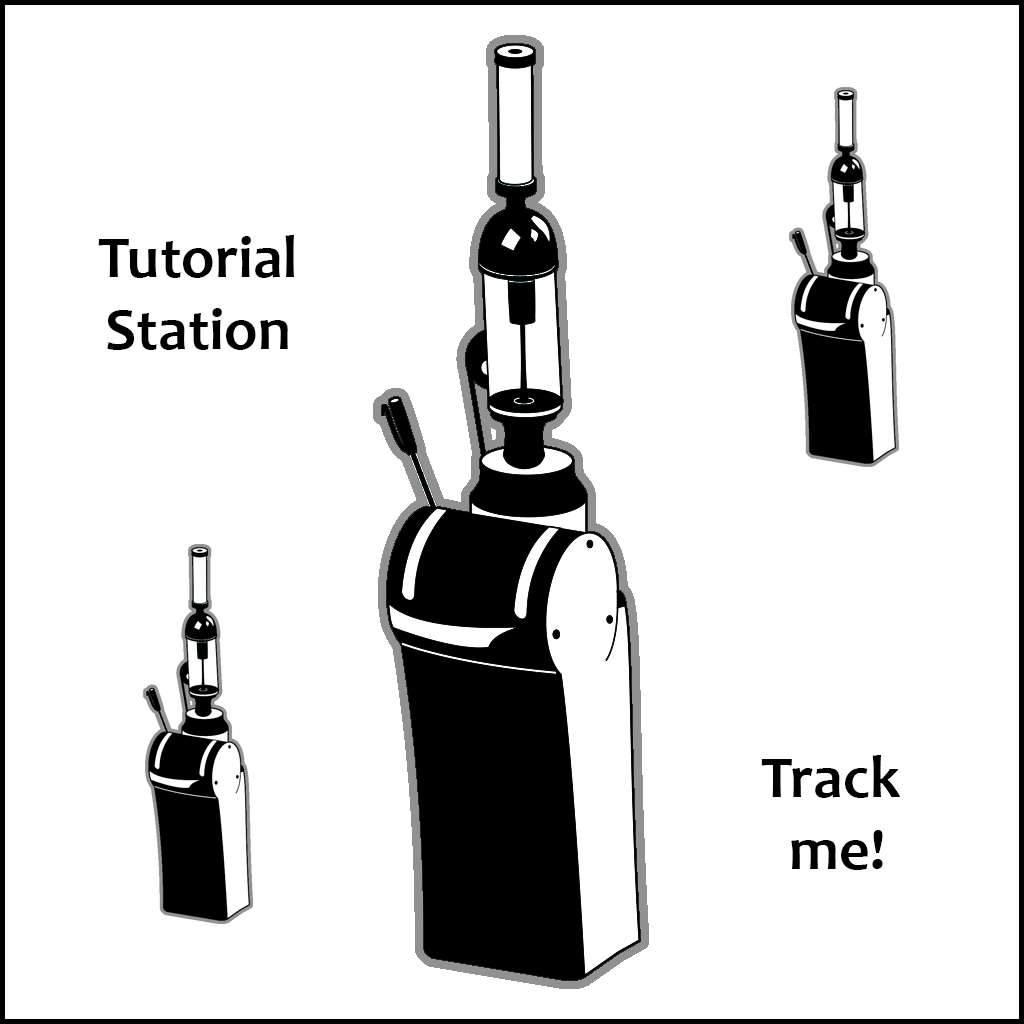
<style>
.page{position:relative;width:1024px;height:1024px;background:#ffffff}
.page>*{position:absolute;margin:0}
.t1{font:60px "Candara-Bold";color:#000000}
</style>
<div class="page">
<p class="t1" style="left:98px;top:235px;width:196px;height:115px;text-align:center">Tutorial<br>Station</p>
<p class="t1" style="left:761px;top:755px;width:140px;height:115px;text-align:center">Track <br>me!</p>
</div>
